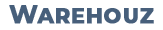
<style>
.page{position:relative;width:163px;height:30px;background:#ffffff}
.page>*{position:absolute;margin:0}
.t1{font:24.8px "Montserrat-Bold";color:#475f7b;font-variant:small-caps;font-weight:bold}
</style>
<div class="page">
<p class="t1" style="left:9px;top:5px;width:145px;height:19px">Warehouz</p>
</div>
